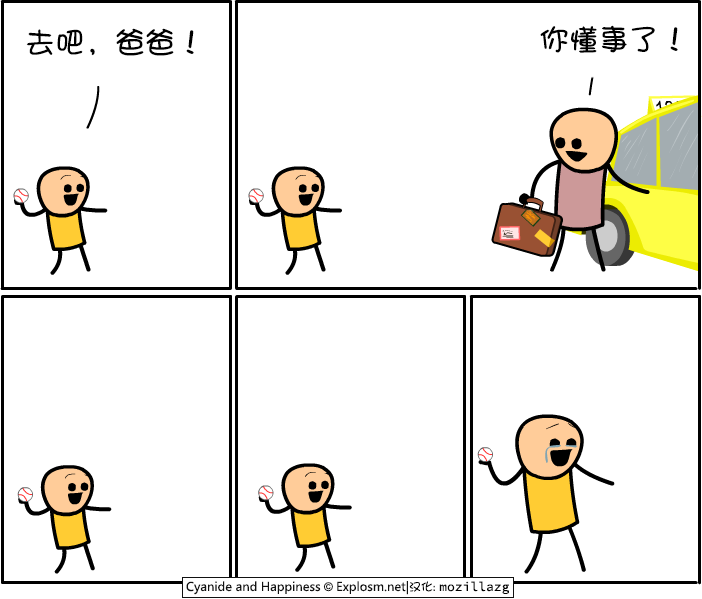
<style>
.page{position:relative;width:702px;height:599px;background:#ffffff}
.page>*{position:absolute;margin:0}
.t1{font:30px "DFShaoNvW5";color:#000000}
</style>
<div class="page">
<p class="t1" style="left:26px;top:28px;width:168px;height:28px">去吧，爸爸！</p>
<p class="t1" style="left:540px;top:25px;width:138px;height:28px">你懂事了！</p>
</div>
